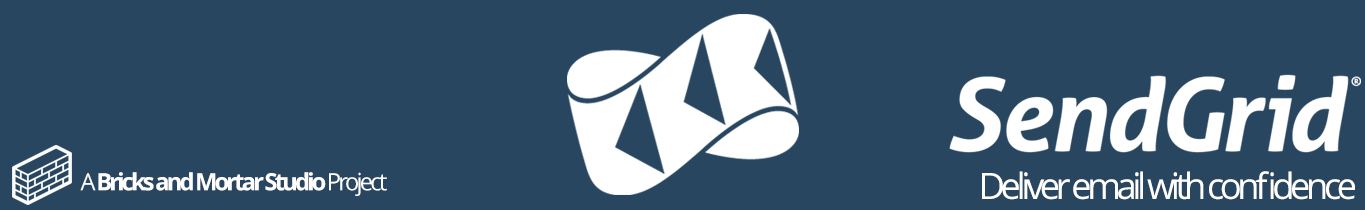
<style>
.page{position:relative;width:1365px;height:210px;background:#294661}
.page>*{position:absolute;margin:0}
.t1{font:23.8px "OpenSans-Bold";letter-spacing:-0.12em;color:#ffffff}
.t2{font:23.8px "OpenSans";letter-spacing:-0.12em;color:#ffffff}
.t3{font:36.2px "OpenSans";letter-spacing:-0.12em;color:#ffffff}
</style>
<div class="page">
<p class="t1" style="left:80px;top:172px;width:307px;height:24px"><span class="t2">A </span>Bricks and Mortar Studio <span class="t2">Project</span></p>
<p class="t3" style="left:982px;top:171px;width:373px;height:29px">Deliver email with confidence</p>
</div>
